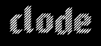
<style>
.page{position:relative;width:101px;height:46px;background:#000000}
.page>*{position:absolute;margin:0}
.t1{font:35px "Murrx"}
</style>
<div class="page">
<p class="t1" style="left:9px;top:5px;width:83px;height:30px">clode</p>
</div>
